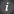
<style>
.page{position:relative;width:14px;height:14px;background:#515151}
.page>*{position:absolute;margin:0}
.t1{font:12.5px "Times-Italic";color:#ffffff}
</style>
<div class="page">
<p class="t1" style="left:5px;top:2px;width:4px;height:9px">i</p>
</div>
